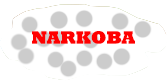
<style>
.page{position:relative;width:167px;height:81px;background:#ffffff}
.page>*{position:absolute;margin:0}
.t1{font:18px "Rockwell-ExtraBold";color:#ff0000}
</style>
<div class="page">
<p class="t1" style="left:32px;top:31px;width:103px;height:13px">NARKOBA</p>
</div>
